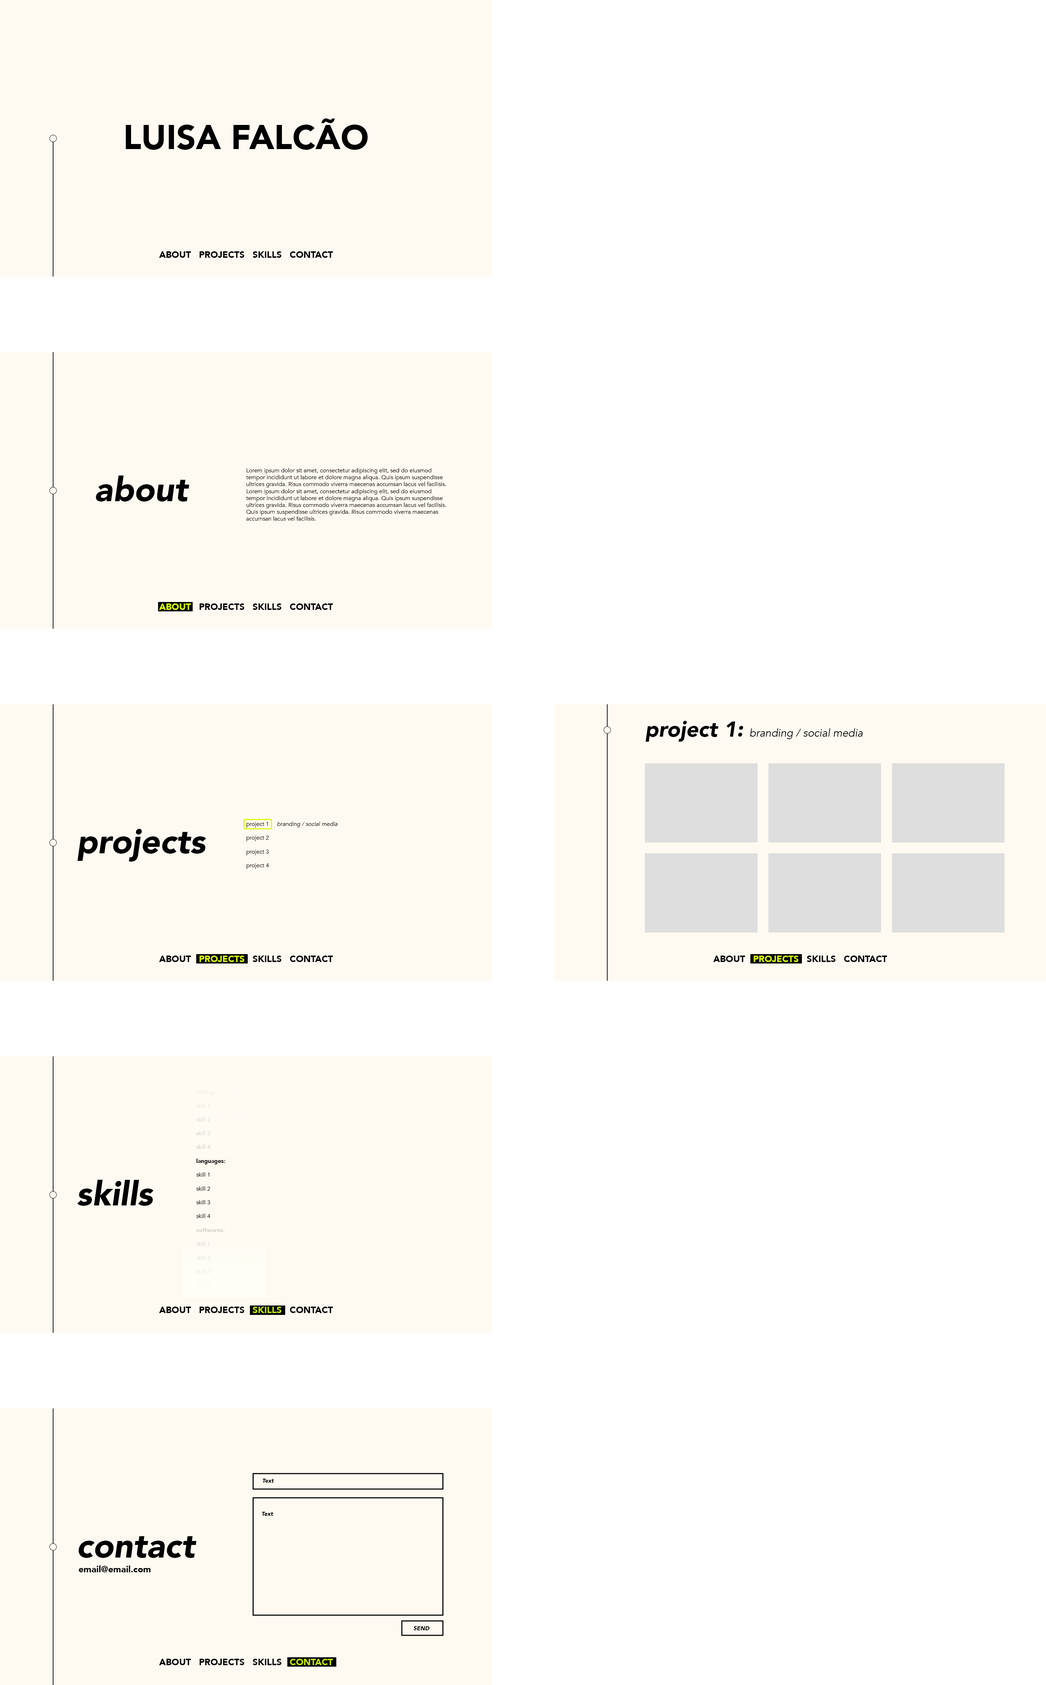
<style>
.page{position:relative;width:1046px;height:1685px;background:#ffffff}
.page>*{position:absolute;margin:0}
.t1{font:33.8px "Avenir-Black";color:#000000;text-transform:uppercase}
.t2{font:9px "Avenir-Black";color:#000000;text-transform:uppercase}
.t3{font:5.8px "Avenir-Book";color:#000000}
.t4{font:33.8px "Avenir-BlackOblique";color:#000000}
.t5{font:9px "Avenir-Black";color:#d9ff06;text-transform:uppercase}
.t6{font:10.8px "Avenir-BookOblique";color:#000000}
.t7{font:21.6px "Avenir-BlackOblique";color:#000000}
.t8{font:5.8px "Avenir-BookOblique";color:#000000}
.t9{font:5.8px "Avenir-Book";color:#c9c5be}
.t10{font:5.8px "Avenir-Black";color:#c9c5be}
.t11{font:5.8px "Avenir-Black";color:#000000}
.t12{font:5.8px "Avenir-Black";color:#d1cdc5}
.t13{font:5.8px "Avenir-Book";color:#d1cdc5}
.t14{font:9px "Avenir-Black";color:#c0e205;text-transform:uppercase}
.t15{font:5.8px "Avenir-BlackOblique";color:#000000}
.t16{font:9px "Avenir-Black";color:#000000}
</style>
<div class="page">
<p class="t1" style="left:126px;top:118px;width:242px;height:32px">Luisa Falcão</p>
<p class="t2" style="left:159px;top:251px;width:174px;height:7px">about   projects   skills   contact</p>
<p class="t3" style="left:246px;top:468px;width:200px;height:53px">Lorem ipsum dolor sit amet, consectetur adipiscing elit, sed do eiusmod tempor incididunt ut labore et dolore magna aliqua. Quis ipsum suspendisse ultrices gravida. Risus commodo viverra maecenas accumsan lacus vel facilisis. <br>Lorem ipsum dolor sit amet, consectetur adipiscing elit, sed do eiusmod tempor incididunt ut labore et dolore magna aliqua. Quis ipsum suspendisse ultrices gravida. Risus commodo viverra maecenas accumsan lacus vel facilisis. Quis ipsum suspendisse ultrices gravida. Risus commodo viverra maecenas accumsan lacus vel facilisis.</p>
<p class="t4" style="left:96px;top:475px;width:93px;height:26px">about</p>
<p class="t2" style="left:159px;top:603px;width:174px;height:7px"><span class="t5">about</span>   projects   skills   contact</p>
<p class="t6" style="left:645px;top:721px;width:218px;height:21px"><span class="t7">project 1: </span>branding / social media</p>
<p class="t3" style="left:246px;top:822px;width:92px;height:47px">project 1     <span class="t8">branding / social media<br></span><br>project 2<br><br>project 3<br><br>project 4</p>
<p class="t4" style="left:77px;top:829px;width:129px;height:32px">projects</p>
<p class="t2" style="left:159px;top:955px;width:174px;height:7px">about  <span class="t5"> projects  </span> skills   contact</p>
<p class="t2" style="left:713px;top:955px;width:174px;height:7px">about  <span class="t5"> projects  </span> skills   contact</p>
<p class="t9" style="left:196px;top:1089px;width:29px;height:198px"><span class="t10">coding:<br></span><br>skill 1<br><br>skill 2<br><br>skill 3<br><br>skill 4<br><br><span class="t11">languages:<br></span><span class="t3"><br>skill 1<br><br>skill 2<br><br>skill 3<br><br>skill 4<br><br></span><span class="t12">softwares:<br></span><span class="t13"><br>skill 1<br><br>skill 2<br><br>skill 3<br><br>skill 4</span></p>
<p class="t4" style="left:77px;top:1179px;width:77px;height:27px">skills</p>
<p class="t2" style="left:159px;top:1306px;width:174px;height:7px">about   projects   <span class="t14">skills</span>   contact</p>
<p class="t15" style="left:262px;top:1479px;width:12px;height:3px">Text</p>
<p class="t15" style="left:262px;top:1512px;width:11px;height:4px">Text</p>
<p class="t4" style="left:78px;top:1536px;width:119px;height:22px">contact</p>
<p class="t16" style="left:79px;top:1565px;width:71px;height:7px">email@email.com</p>
<p class="t15" style="left:413px;top:1626px;width:16px;height:4px">SEND</p>
<p class="t2" style="left:159px;top:1659px;width:174px;height:6px">about   projects   skills   <span class="t14">contact</span></p>
</div>
